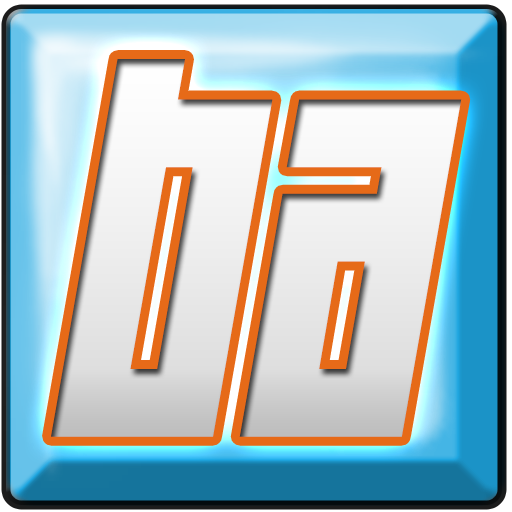
<style>
.page{position:relative;width:512px;height:512px}
.page>*{position:absolute;margin:0}
.t1{font:449.6px "WideawakeBlack";color:#e8e8e8}
</style>
<div class="page">
<p class="t1" style="left:51px;top:59px;width:411px;height:378px">BA</p>
</div>
